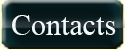
<style>
.page{position:relative;width:125px;height:50px}
.page>*{position:absolute;margin:0}
.t1{font:30px "TimesNewRomanPSMT";color:#f1f8f9}
</style>
<div class="page">
<p class="t1" style="left:12px;top:15px;width:104px;height:20px">Contacts</p>
</div>
